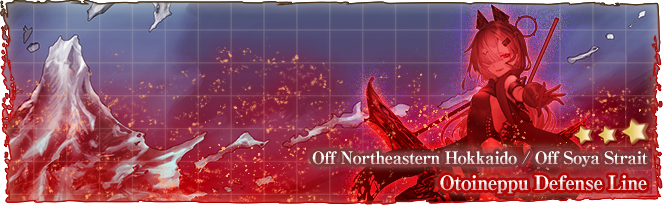
<style>
.page{position:relative;width:663px;height:205px}
.page>*{position:absolute;margin:0}
.t1{font:17px "RyuminPro-ExBold";letter-spacing:-0.04em}
.t2{font:20px "RyuminPro-ExBold";letter-spacing:-0.04em}
</style>
<div class="page">
<p class="t1" style="left:312px;top:151px;width:336px;height:16px">Off Northeastern Hokkaido / Off Soya Strait</p>
<p class="t2" style="left:440px;top:175px;width:207px;height:19px">Otoineppu Defense Line</p>
</div>
